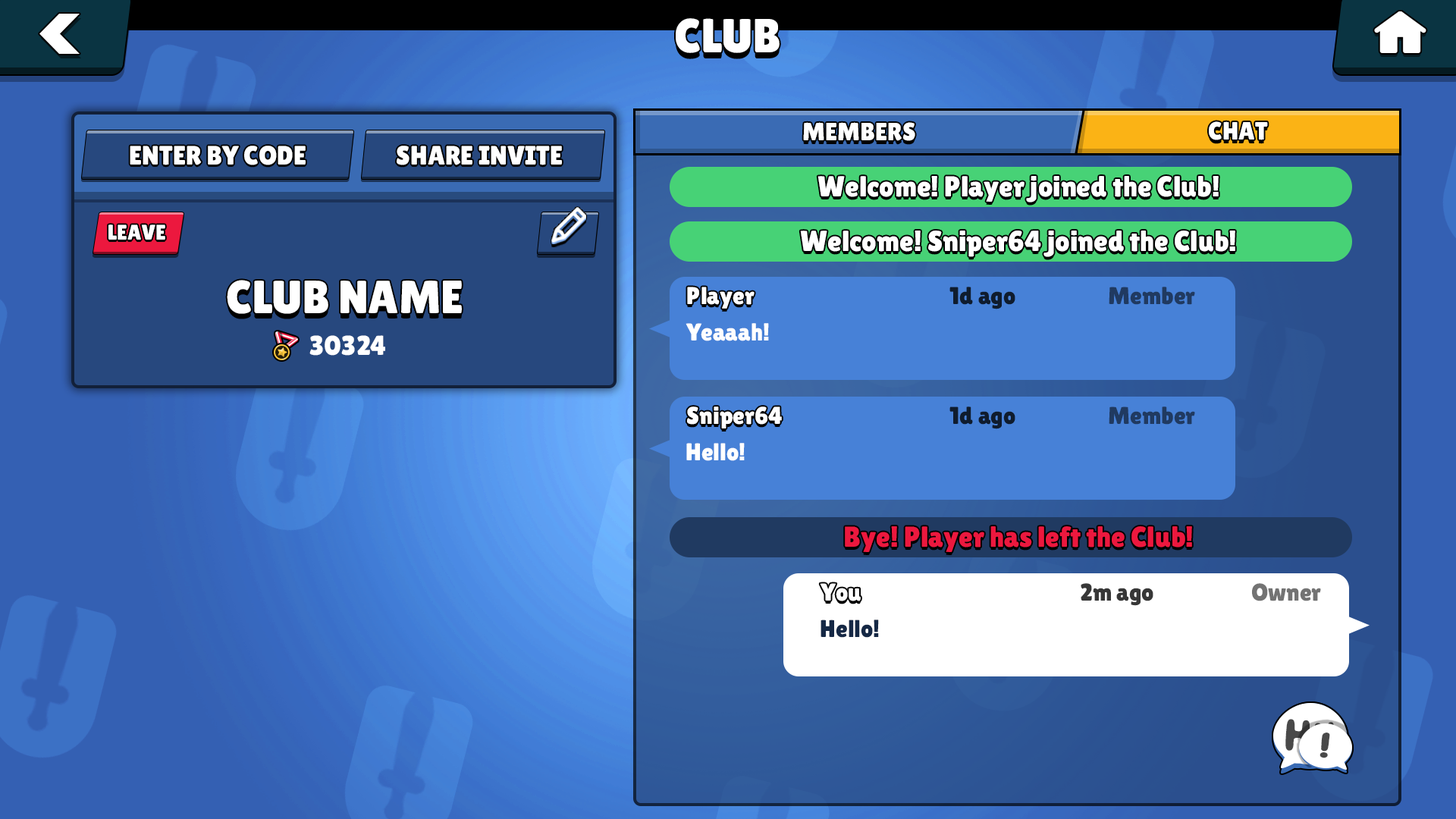
<style>
.page{position:relative;width:1456px;height:819px}
.page>*{position:absolute;margin:0}
.t1{font:47.8px "LilitaOne";color:#ffffff}
.t2{font:25px "LilitaOne";color:#ffffff}
.t3{font:26.6px "LilitaOne";color:#ffffff}
.t4{font:28.9px "LilitaOne";color:#ffffff}
.t5{font:21.3px "LilitaOne";color:#ffffff}
.t6{font:46.5px "LilitaOne";color:#ffffff}
.t7{font:24.3px "LilitaOne";color:#ffffff}
.t8{font:24.3px "LilitaOne";color:#0f1c2e}
.t9{font:24.3px "LilitaOne";color:#203a61}
.t10{font:27.3px "LilitaOne";color:#ffffff}
.t11{font:28.9px "LilitaOne";color:#ec183e}
.t12{font:24.3px "LilitaOne";color:#373737}
.t13{font:24.3px "LilitaOne";color:#737373}
.t14{font:24.3px "LilitaOne";color:#152845}
.t15{font:45px "Albus"}
.t16{font:36.5px "Albus";color:#494949;scale:1.48 1}
</style>
<div class="page">
<p class="t1" style="left:676px;top:18px;width:104px;height:35px">CLUB</p>
<p class="t2" style="left:803px;top:122px;width:112px;height:19px">MEMBERS</p>
<p class="t2" style="left:1209px;top:121px;width:59px;height:19px">CHAT</p>
<p class="t3" style="left:130px;top:146px;width:176px;height:19px">ENTER BY CODE</p>
<p class="t3" style="left:397px;top:146px;width:165px;height:19px">SHARE INVITE</p>
<p class="t4" style="left:817px;top:176px;width:402px;height:26px">Welcome! Player joined the Club!</p>
<p class="t5" style="left:108px;top:224px;width:57px;height:16px">LEAVE</p>
<p class="t4" style="left:800px;top:231px;width:435px;height:26px">Welcome! Sniper64 joined the Club!</p>
<p class="t6" style="left:227px;top:280px;width:235px;height:34px">CLUB NAME</p>
<p class="t7" style="left:687px;top:287px;width:68px;height:22px">Player</p>
<p class="t8" style="left:949px;top:287px;width:66px;height:22px">1d ago</p>
<p class="t9" style="left:1109px;top:287px;width:86px;height:18px">Member</p>
<p class="t7" style="left:686px;top:323px;width:83px;height:18px">Yeaaah!</p>
<p class="t10" style="left:309px;top:335px;width:76px;height:21px">30324</p>
<p class="t7" style="left:687px;top:406px;width:95px;height:22px">Sniper64</p>
<p class="t8" style="left:949px;top:406px;width:66px;height:23px">1d ago</p>
<p class="t9" style="left:1109px;top:406px;width:86px;height:19px">Member</p>
<p class="t7" style="left:686px;top:443px;width:59px;height:18px">Hello!</p>
<p class="t11" style="left:845px;top:526px;width:347px;height:26px">Bye! Player has left the Club!</p>
<p class="t7" style="left:820px;top:583px;width:41px;height:18px">You</p>
<p class="t12" style="left:1081px;top:583px;width:72px;height:23px">2m ago</p>
<p class="t13" style="left:1252px;top:583px;width:69px;height:18px">Owner</p>
<p class="t14" style="left:821px;top:620px;width:58px;height:18px">Hello!</p>
<p class="t15" style="left:1285px;top:719px;width:49px;height:35px;rotate:4deg">Hi!</p>
<p class="t16" style="left:1319px;top:733px;width:11px;height:25px;rotate:3deg">!</p>
</div>
